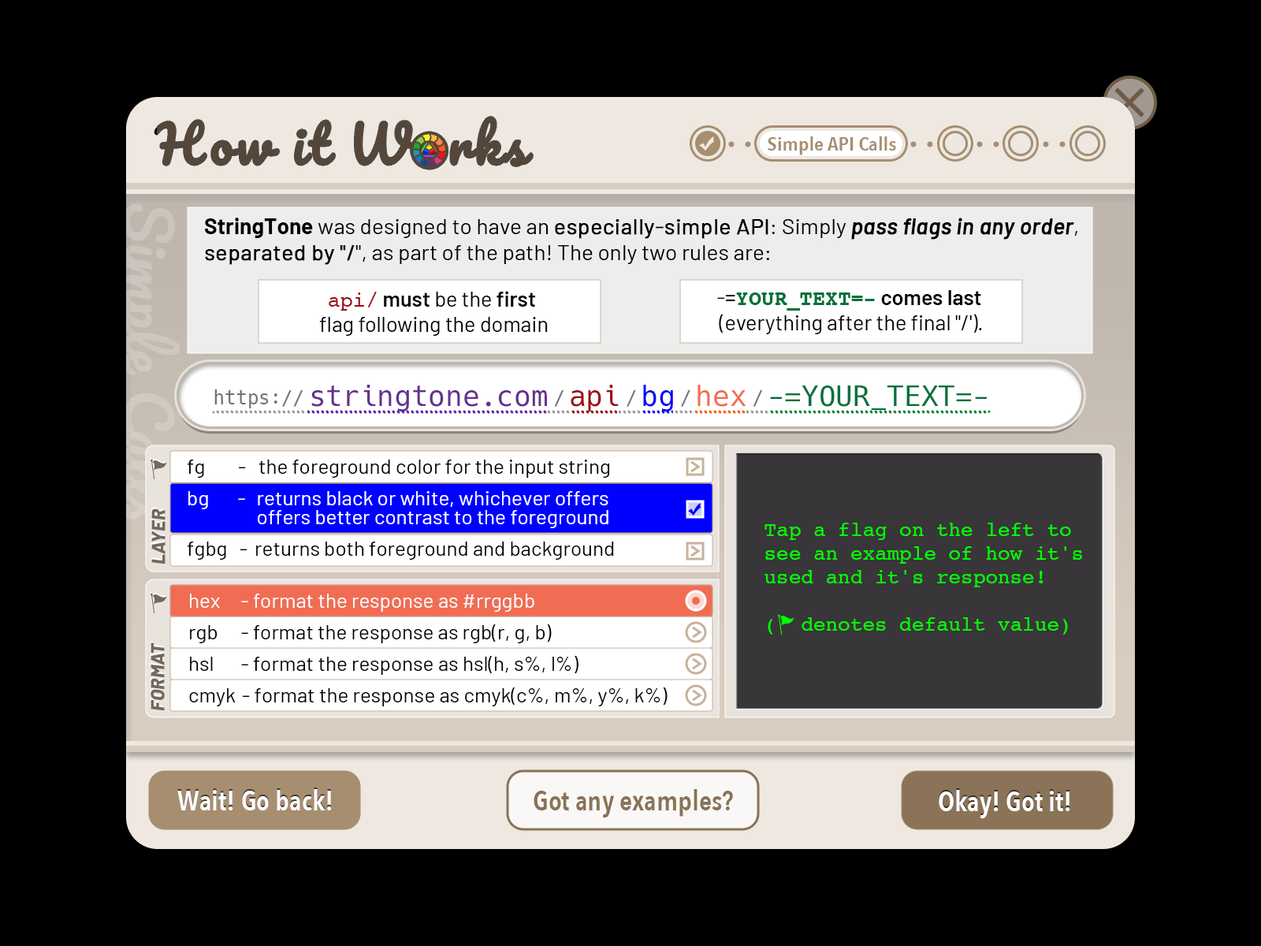
<style>
.page{position:relative;width:1261px;height:946px;background:#000000}
.page>*{position:absolute;margin:0}
.t1{font:73.6px "AvenirNext-Regular";color:#6e5c46}
.t2{font:19.2px "AvenirNextCondensed-DemiBold";color:#a78e71;scale:1.11 1}
.t3{font:59.3px "Pacifico-Regular";color:#cdc7be}
.t4{font:22.1px "Barlow-Regular";color:#000000}
.t5{font:22.1px "Barlow-Bold";color:#000000}
.t6{font:22.1px "Barlow-Regular";color:#000000;font-weight:bold}
.t7{font:22.1px "Barlow-MediumItalic";color:#000000;font-weight:bold}
.t8{font:21.3px "Barlow-Regular";color:#000000}
.t9{font:21.3px "Courier";color:#9c0f17}
.t10{font:21.3px "Barlow-SemiBold";color:#000000}
.t11{font:21.3px "Courier-Bold";color:#007138}
.t12{font:28.4px "Hack-Regular";color:#65318f}
.t13{font:18.9px "Hack-Regular";color:#737373}
.t14{font:28.4px "Hack-Regular";color:#9c0f17}
.t15{font:28.4px "Hack-Regular";color:#0000ff}
.t16{font:28.4px "Hack-Regular";color:#f06d54}
.t17{font:28.4px "Hack-Regular";color:#007138}
.t18{font:20.5px/31.5px "Barlow-Regular";color:#000000}
.t19{font:20.5px/31.5px "Barlow-Regular";color:#ffffff}
.t20{font:20.5px/18.9px "Barlow-Regular";color:#ffffff}
.t21{font:18.9px "Barlow-ExtraBoldItalic";color:#73685c}
.t22{font:20.5px/23.6px "Courier";color:#00ff00}
.t23{font:28.4px "AvenirNextCondensed-DemiBold";color:#ffffff}
.t24{font:28.4px "AvenirNextCondensed-DemiBold";color:#8a7357}
</style>
<div class="page">
<p class="t1" style="left:1114px;top:87px;width:30px;height:30px;rotate:45deg">+</p>
<p class="t2" style="left:768px;top:136px;width:128px;height:19px">Simple API Calls</p>
<p class="t3" style="left:97px;top:203px;width:83px;height:317px;rotate:90deg">Simple Calls</p>
<p class="t4" style="left:205px;top:218px;width:872px;height:47px"><span class="t5">StringTone </span>was designed to have an <span class="t6">especially-simple API</span>: Simply <span class="t7">pass flags in any order</span>, <span class="t6">separated by "/</span>", as part of the path! The only two rules are:</p>
<p class="t8" style="left:319px;top:291px;width:229px;height:45px;text-align:center"><span class="t9">api/</span><span class="t10"> must </span>be the <span class="t10">first <br></span>flag following the domain</p>
<p class="t8" style="left:717px;top:290px;width:265px;height:44px;text-align:center">-=<span class="t11">YOUR_TEXT=-</span><span class="t10"> comes last</span> <br>(everything after the final "/').</p>
<p class="t12" style="left:214px;top:385px;width:773px;height:26px"><span class="t13">https://</span>stringtone.com<span class="t13">/</span><span class="t14">api</span><span class="t13">/</span><span class="t15">bg</span><span class="t13">/</span><span class="t16">hex</span><span class="t13">/</span><span class="t17">-=YOUR_TEXT=-</span></p>
<p class="t18" style="left:187px;top:459px;width:427px;height:101px">fg        -   the foreground color for the input string<br><span class="t19">bg       -  returns black or white, whichever offers<br></span><span class="t20">                 offers better contrast to the foreground<br></span>fgbg   - returns both foreground and background</p>
<p class="t21" style="left:151px;top:508px;width:14px;height:56px;rotate:-90deg">LAYER</p>
<p class="t22" style="left:764px;top:522px;width:318px;height:112px">Tap a flag on the left to see an example of how it's used and it's response!<br><br>(  denotes default value)</p>
<p class="t18" style="left:189px;top:593px;width:478px;height:113px"><span class="t19">hex     - format the response as #rrggbb<br></span>rgb     - format the response as rgb(r, g, b)<br>hsl      - format the response as hsl(h, s%, l%)<br>cmyk - format the response as cmyk(c%, m%, y%, k%)</p>
<p class="t21" style="left:151px;top:642px;width:14px;height:69px;rotate:-90deg">FORMAT</p>
<p class="t23" style="left:177px;top:789px;width:155px;height:21px">Wait! Go back!</p>
<p class="t24" style="left:534px;top:789px;width:199px;height:28px">Got any examples?</p>
<p class="t23" style="left:939px;top:790px;width:131px;height:28px">Okay! Got it!</p>
</div>
